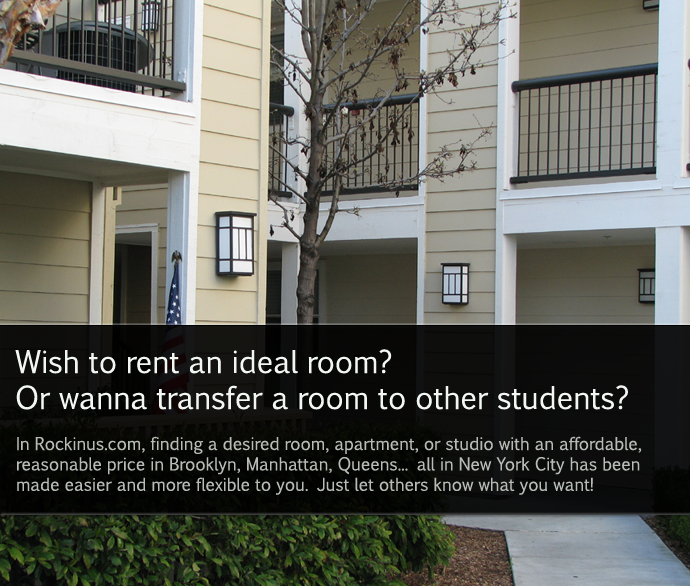
<style>
.page{position:relative;width:690px;height:586px}
.page>*{position:absolute;margin:0}
.t1{font:30px "EuphemiaCAS";color:#f3f7f3}
.t2{font:17px "EuphemiaCAS";color:#b7bcb7}
</style>
<div class="page">
<p class="t1" style="left:15px;top:349px;width:613px;height:61px">Wish to rent an ideal room?<br>Or wanna transfer a room to other students?</p>
<p class="t2" style="left:17px;top:436px;width:625px;height:59px">In Rockinus.com, finding a desired room, apartment, or studio with an affordable, <br>reasonable price in Brooklyn, Manhattan, Queens... all in New York City has been<br>made easier and more flexible to you. Just let others know what you want!</p>
</div>
